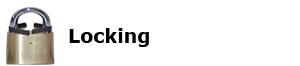
<style>
.page{position:relative;width:300px;height:66px;background:#ffffff}
.page>*{position:absolute;margin:0}
.t1{font:19px "Verdana-Bold";color:#000000}
</style>
<div class="page">
<p class="t1" style="left:69px;top:28px;width:80px;height:19px">Locking</p>
</div>
